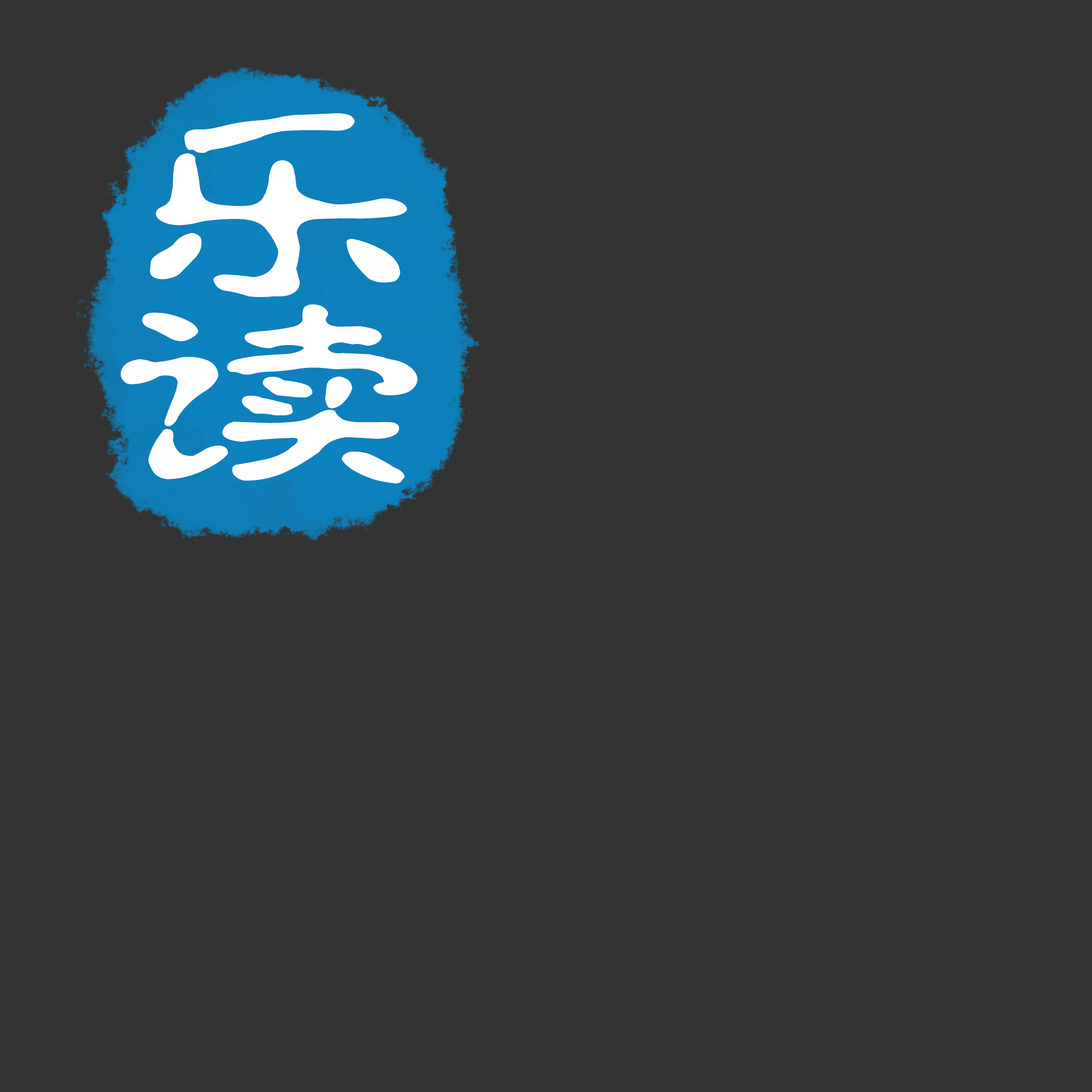
<style>
.page{position:relative;width:1092px;height:1092px;background:#333333}
.page>*{position:absolute;margin:0}
.t1{font:197.3px "CloudShuiZhuGBK";color:#ffffff;font-weight:bold;scale:1.62 1}
.t2{font:196.4px "CloudShuiZhuGBK";color:#ffffff;font-weight:bold;scale:1.65 1}
</style>
<div class="page">
<p class="t1" style="left:150px;top:113px;width:257px;height:184px">乐</p>
<p class="t2" style="left:121px;top:304px;width:297px;height:180px">读</p>
</div>
